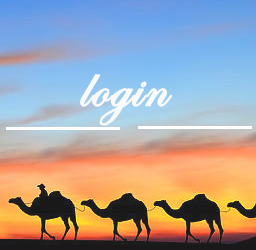
<style>
.page{position:relative;width:256px;height:250px}
.page>*{position:absolute;margin:0}
.t1{font:60px "EdwardianScriptITC";color:#f9fafb;font-weight:bold}
</style>
<div class="page">
<p class="t1" style="left:80px;top:74px;width:93px;height:52px">login</p>
</div>
